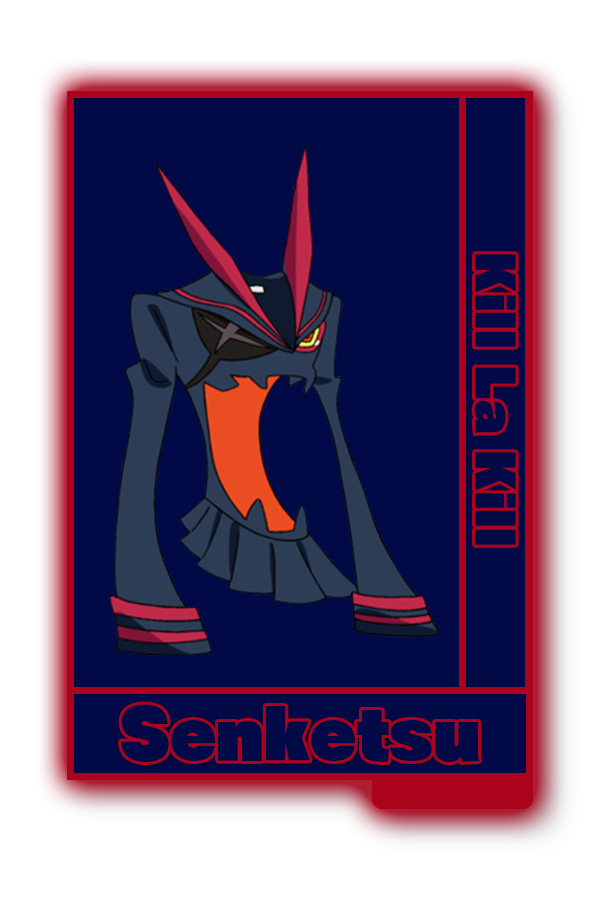
<style>
.page{position:relative;width:600px;height:900px;background:#010947}
.page>*{position:absolute;margin:0}
.t1{font:48.8px "RaglanPunchStd-UB";color:#010947}
.t2{font:65.2px "RaglanPunchStd-UB";color:#010947}
</style>
<div class="page">
<p class="t1" style="left:474px;top:254px;width:42px;height:291px;rotate:90deg">Kill La Kill</p>
<p class="t2" style="left:121px;top:704px;width:358px;height:58px">Senketsu</p>
</div>
